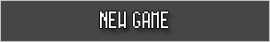
<style>
.page{position:relative;width:270px;height:42px;background:#464646}
.page>*{position:absolute;margin:0}
.t1{font:24px "Power-Green-Narrow";color:#ffffff}
</style>
<div class="page">
<p class="t1" style="left:99px;top:11px;width:70px;height:18px">NEW GAME</p>
</div>
